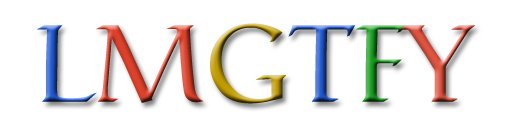
<style>
.page{position:relative;width:512px;height:128px;background:#ffffff}
.page>*{position:absolute;margin:0}
.t1{font:108px "Catull-Regular";color:#2259d0}
.t2{font:108px "Catull-Regular";color:#dc412b}
.t3{font:108px "Catull-Regular";color:#c09b03}
.t4{font:108px "Catull-Regular";color:#199f20}
.t5{font:108px "Catull-Regular";color:#df5440}
</style>
<div class="page">
<p class="t1" style="left:37px;top:23px;width:439px;height:81px">L<span class="t2">M</span><span class="t3">G</span>T<span class="t4">F</span><span class="t5">Y</span></p>
</div>
